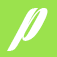
<style>
.page{position:relative;width:57px;height:57px;background:#9be24d}
.page>*{position:absolute;margin:0}
.t1{font:60px "HarbellPersonalUseOnly";color:#ffffff}
</style>
<div class="page">
<p class="t1" style="left:7px;top:8px;width:41px;height:43px">p</p>
</div>
